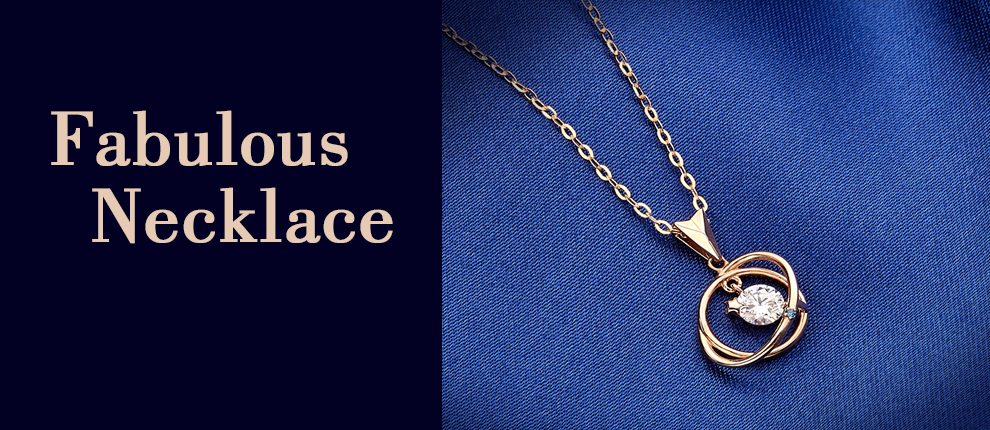
<style>
.page{position:relative;width:990px;height:430px;background:#020123}
.page>*{position:absolute;margin:0}
.t1{font:80px "Bodoni-BkBT";color:#e6cab4;font-weight:bold}
</style>
<div class="page">
<p class="t1" style="left:51px;top:110px;width:297px;height:56px">Fabulous</p>
<p class="t1" style="left:92px;top:187px;width:301px;height:57px">Necklace</p>
</div>
